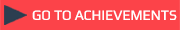
<style>
.page{position:relative;width:180px;height:30px;background:#fc4349}
.page>*{position:absolute;margin:0}
.t1{font:14px "Play";color:#ffffff}
</style>
<div class="page">
<p class="t1" style="left:32px;top:10px;width:145px;height:10px">GO TO ACHIEVEMENTS</p>
</div>
